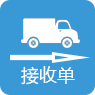
<style>
.page{position:relative;width:95px;height:95px;background:#3998d6}
.page>*{position:absolute;margin:0}
.t1{font:18px "MicrosoftYaHei";color:#ffffff}
</style>
<div class="page">
<p class="t1" style="left:21px;top:66px;width:54px;height:19px">接收单</p>
</div>
